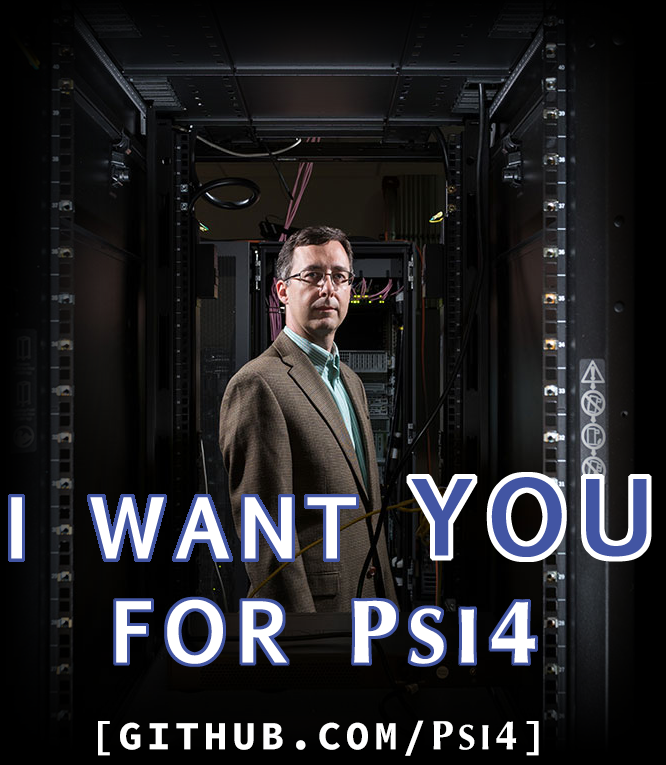
<style>
.page{position:relative;width:666px;height:765px}
.page>*{position:absolute;margin:0}
.t1{font:80px "EuphemiaUCAS-Bold";letter-spacing:0.11em;color:#ffffff;text-transform:uppercase}
.t2{font:90px "Optima-Bold";letter-spacing:0.11em;color:#ffffff}
.t3{font:77.4px "Optima-Bold";letter-spacing:0.11em;color:#ffffff}
.t4{font:40px "SourceCodePro-Bold";letter-spacing:0.11em;color:#ffffff;text-transform:uppercase}
.t5{font:41px "Optima-Bold";letter-spacing:0.11em;color:#ffffff;text-transform:uppercase}
.t6{font:35.2px "Optima-Bold";letter-spacing:0.11em;color:#ffffff;text-transform:uppercase}
</style>
<div class="page">
<p class="t1" style="left:116px;top:599px;width:420px;height:65px">for <span class="t2">P</span><span class="t3">SI</span><span class="t2">4</span></p>
<p class="t4" style="left:98px;top:720px;width:441px;height:36px">[github.com/<span class="t5">p</span><span class="t6">si</span><span class="t5">4</span>]</p>
</div>
